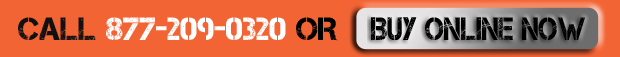
<style>
.page{position:relative;width:620px;height:57px;background:#f36435}
.page>*{position:absolute;margin:0}
.t1{font:32px "Captureit";color:#ffffff;text-transform:uppercase}
.t2{font:32px "Captureit";color:#111111;text-transform:uppercase}
.t3{font:32px "Captureit";color:#000000;text-transform:uppercase}
.t4{font:32.3px "Captureit";color:#000000;text-transform:uppercase;scale:0.86 1}
</style>
<div class="page">
<p class="t1" style="left:18px;top:17px;width:320px;height:24px"><span class="t2">Call </span>877-209-0320 <span class="t3">or</span></p>
<p class="t4" style="left:371px;top:17px;width:214px;height:23px">buy online now</p>
</div>
